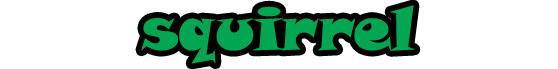
<style>
.page{position:relative;width:558px;height:69px;background:#ffffff}
.page>*{position:absolute;margin:0}
.t1{font:60px "SnapITC-Regular";color:#00a651}
</style>
<div class="page">
<p class="t1" style="left:141px;top:5px;width:274px;height:59px">squirrel</p>
</div>
